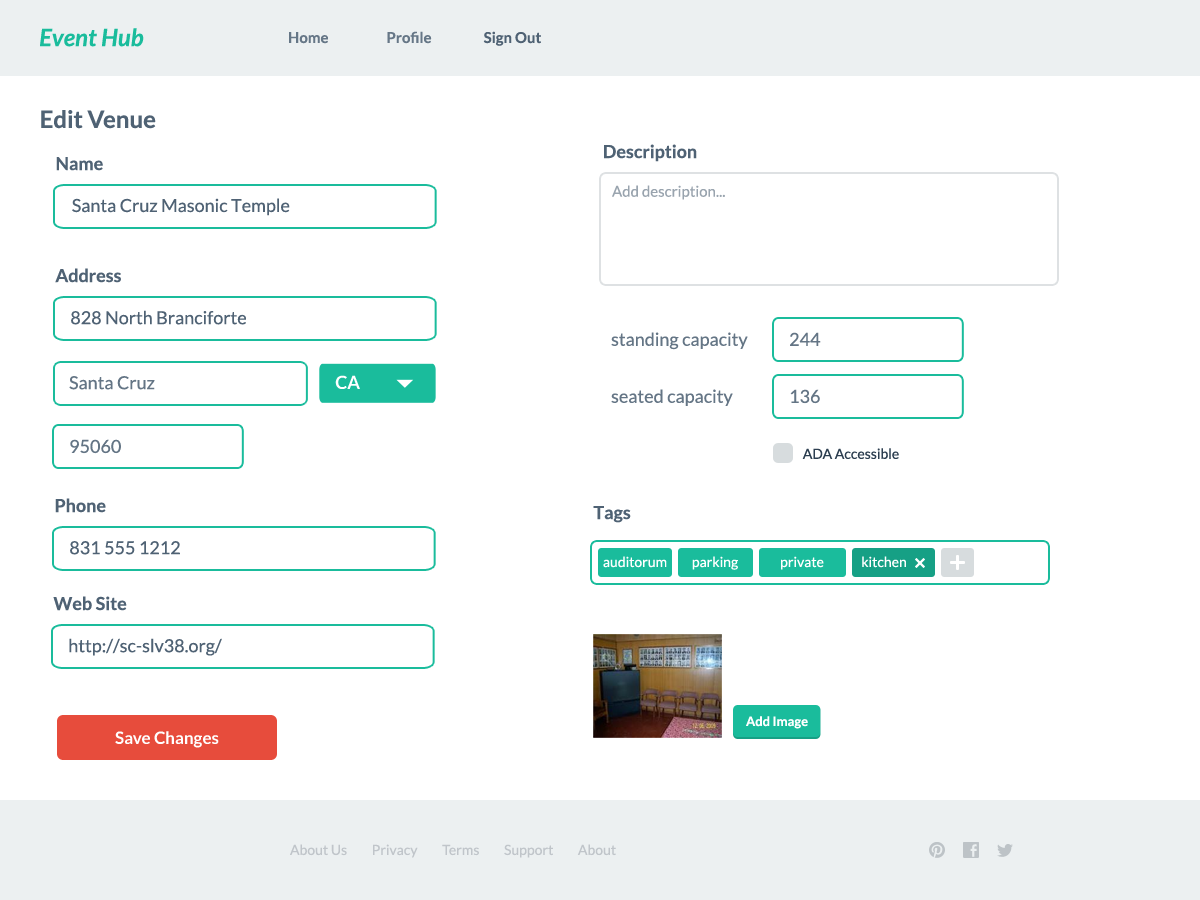
<style>
.page{position:relative;width:1200px;height:900px;background:#ffffff}
.page>*{position:absolute;margin:0}
.t1{font:24px "Lato-BoldItalic";color:#1abc9c}
.t2{font:15px "Lato-Bold";color:#4f6274}
.t3{font:15px "Lato-Bold";color:#34495e}
.t4{font:24px "Lato-Bold";color:#4f6274}
.t5{font:18px "Lato-Bold";color:#4f6274}
.t6{font:15px "Lato-Regular";color:#99a4ae}
.t7{font:18px "Lato-Regular";color:#4f6274}
.t8{font:18px "Lato-Regular";color:#647585}
.t9{font:18px "Lato-Bold";color:#ffffff}
.t10{font:14.1px "Lato-Regular";color:#2c3e50}
.t11{font:14px "Lato-Regular";color:#ffffff}
.t12{font:13px "Lato-Bold";color:#ffffff}
.t13{font:17px "Lato-Bold";color:#ffffff}
.t14{font:14px "Lato-Regular";color:#c0c5ca}
</style>
<div class="page">
<p class="t1" style="left:40px;top:28px;width:104px;height:19px">Event Hub</p>
<p class="t2" style="left:289px;top:31px;width:252px;height:15px;opacity:0.85">Home                    Profile                  <span class="t3">Sign Out</span></p>
<p class="t4" style="left:41px;top:110px;width:115px;height:19px">Edit Venue</p>
<p class="t5" style="left:604px;top:144px;width:93px;height:18px">Description</p>
<p class="t5" style="left:56px;top:157px;width:47px;height:14px">Name</p>
<p class="t6" style="left:612px;top:185px;width:113px;height:15px">Add description...</p>
<p class="t7" style="left:72px;top:198px;width:218px;height:18px">Santa Cruz Masonic Temple</p>
<p class="t5" style="left:55px;top:268px;width:66px;height:15px">Address</p>
<p class="t7" style="left:71px;top:310px;width:175px;height:15px">828 North Branciforte</p>
<p class="t8" style="left:611px;top:332px;width:137px;height:18px">standing capacity</p>
<p class="t8" style="left:790px;top:332px;width:31px;height:14px">244</p>
<p class="t8" style="left:69px;top:376px;width:86px;height:14px">Santa Cruz</p>
<p class="t9" style="left:335px;top:375px;width:25px;height:14px">CA</p>
<p class="t8" style="left:611px;top:389px;width:122px;height:17px">seated capacity</p>
<p class="t8" style="left:790px;top:389px;width:30px;height:15px">136</p>
<p class="t8" style="left:70px;top:439px;width:51px;height:15px">95060</p>
<p class="t10" style="left:802px;top:448px;width:97px;height:11px">ADA Accessible</p>
<p class="t5" style="left:55px;top:498px;width:51px;height:15px">Phone</p>
<p class="t5" style="left:593px;top:506px;width:38px;height:17px">Tags</p>
<p class="t7" style="left:70px;top:541px;width:110px;height:14px">831 555 1212</p>
<p class="t11" style="left:603px;top:556px;width:64px;height:12px">auditorum</p>
<p class="t11" style="left:692px;top:556px;width:46px;height:14px">parking</p>
<p class="t11" style="left:781px;top:556px;width:43px;height:14px">private</p>
<p class="t11" style="left:862px;top:556px;width:44px;height:12px">kitchen</p>
<p class="t5" style="left:53px;top:596px;width:74px;height:15px">Web Site</p>
<p class="t7" style="left:69px;top:638px;width:153px;height:18px">http://sc-slv38.org/</p>
<p class="t12" style="left:746px;top:716px;width:62px;height:13px">Add Image</p>
<p class="t13" style="left:115px;top:731px;width:104px;height:17px">Save Changes</p>
<p class="t14" style="left:290px;top:844px;width:326px;height:14px">About Us         Privacy         Terms         Support         About</p>
</div>
